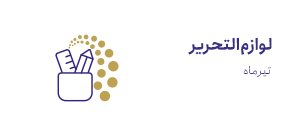
<style>
.page{position:relative;width:296px;height:136px;background:#ffffff}
.page>*{position:absolute;margin:0}
.t1{font:15.7px "Anjoman-Bold";letter-spacing:-0.02em;color:#382f87;scale:1.06 1}
.t2{font:11.8px "Anjoman-Light";letter-spacing:-0.02em;color:#382f87;scale:1.06 1}
</style>
<div class="page">
<p class="t1" style="left:188px;top:37px;width:84px;height:18px">لوازم التحریر</p>
<p class="t2" style="left:243px;top:65px;width:28px;height:13px">تیر ماه</p>
</div>
